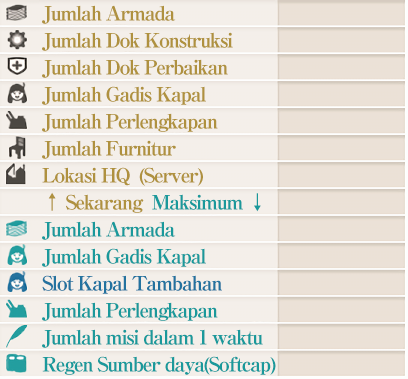
<style>
.page{position:relative;width:408px;height:379px;background:#f4efea}
.page>*{position:absolute;margin:0}
.t1{font:20px/27px "RyuminPro-ExBold";letter-spacing:-0.08em;color:#af913f}
.t2{font:20px/27px "RyuminPro-ExBold";letter-spacing:-0.08em;color:#1a999b}
.t3{font:20px/27px "RyuminPro-ExBold";letter-spacing:-0.08em;color:#23729f}
</style>
<div class="page">
<p class="t1" style="left:42px;top:5px;width:234px;height:370px">Jumlah Armada<br>Jumlah Dok Konstruksi<br>Jumlah Dok Perbaikan<br>Jumlah Gadis Kapal<br>Jumlah Perlengkapan<br>Jumlah Furnitur<br>Lokasi HQ  (Server)<br>← Sekarang  <span class="t2">Maksimum ↓<br>Jumlah Armada<br>Jumlah Gadis Kapal<br></span><span class="t3">Slot Kapal Tambahan<br></span><span class="t2">Jumlah Perlengkapan<br>Jumlah misi dalam 1 waktu<br>Regen Sumber daya(Softcap)</span></p>
</div>
